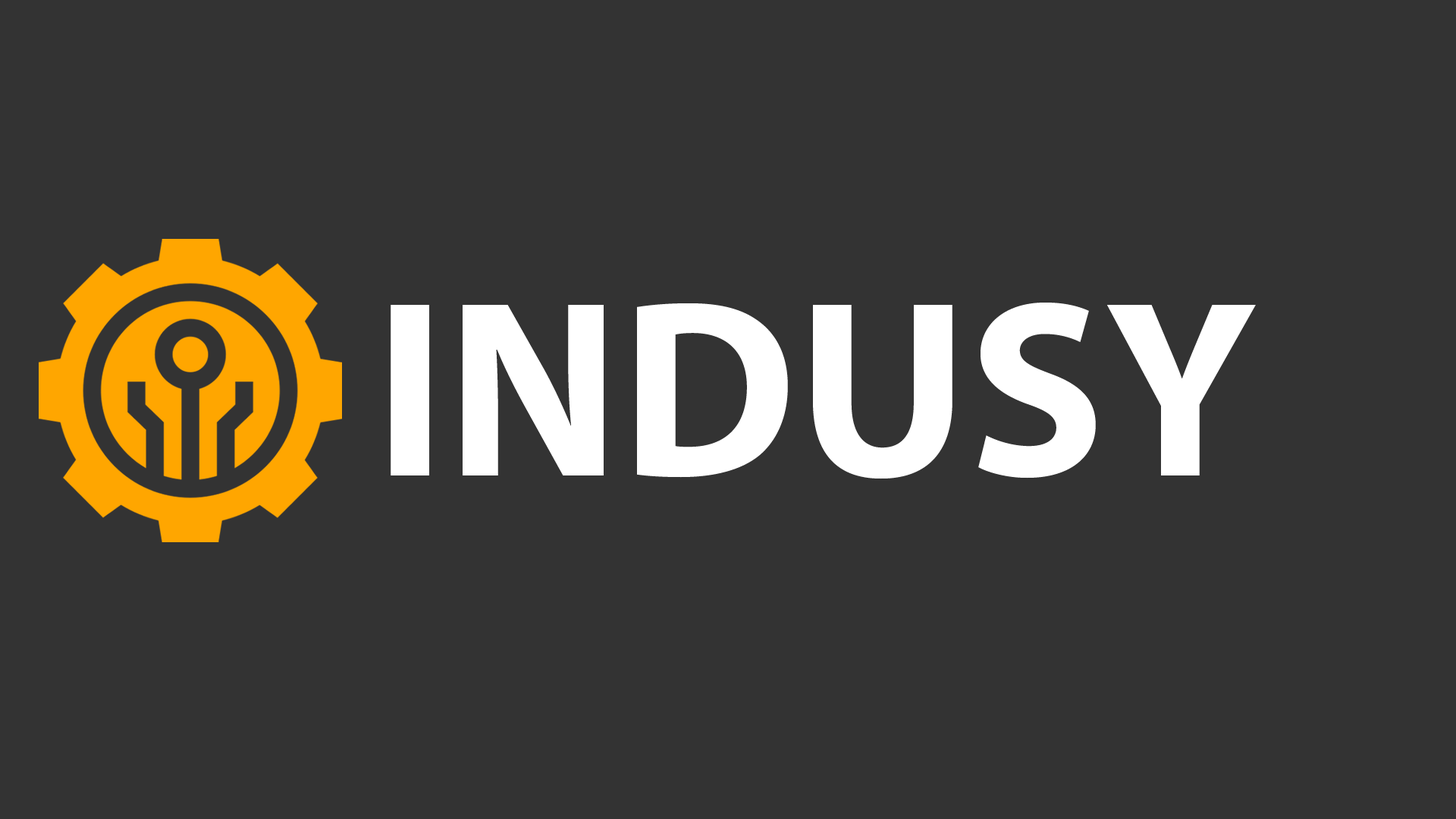
<style>
.page{position:relative;width:1456px;height:819px;background:#333333}
.page>*{position:absolute;margin:0}
.t1{font:252.8px "MyriadPro-Bold";color:#ffffff}
</style>
<div class="page">
<p class="t1" style="left:391px;top:303px;width:865px;height:176px">INDUSY</p>
</div>
